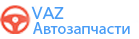
<style>
.page{position:relative;width:139px;height:39px;background:#ffffff}
.page>*{position:absolute;margin:0}
.t1{font:16.6px "Gen-Regular";color:#4a9df6}
.t2{font:16.6px "MyriadPro-Regular";color:#4a9df6}
</style>
<div class="page">
<p class="t1" style="left:31px;top:6px;width:33px;height:13px">VAZ</p>
<p class="t2" style="left:33px;top:22px;width:97px;height:12px">Автозапчасти</p>
</div>
